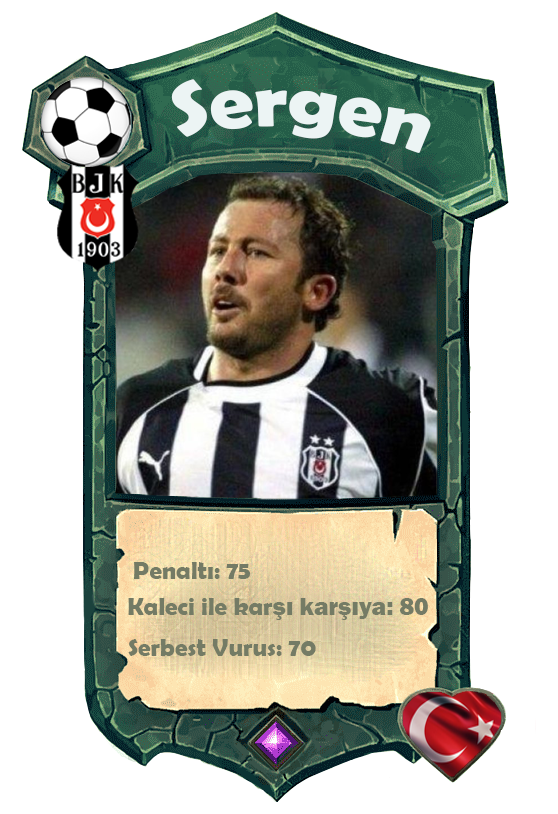
<style>
.page{position:relative;width:558px;height:814px;background:#ffffff}
.page>*{position:absolute;margin:0}
.t1{font:75.7px "BerlinSansFBDemi-Bold";color:#ecf4f4;scale:1.06 1}
.t2{font:25px "BerlinSansFBDemi-Bold";color:#747b65}
.t3{font:25px "FranklinGothic-Heavy";color:#747b65}
</style>
<div class="page">
<p class="t1" style="left:171px;top:79px;width:260px;height:74px;rotate:4deg">Sergen</p>
<p class="t2" style="left:134px;top:562px;width:116px;height:17px">Penaltı: 75</p>
<p class="t2" style="left:128px;top:598px;width:300px;height:22px">Kaleci ile kar<span class="t3">şı karşıya: 80</span></p>
<p class="t2" style="left:128px;top:639px;width:188px;height:17px">Serbest Vurus: 70</p>
</div>
